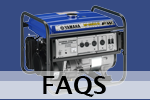
<style>
.page{position:relative;width:150px;height:100px;background:#364b83}
.page>*{position:absolute;margin:0}
.t1{font:24.3px "LucidaSans-Demi";color:#000000}
</style>
<div class="page">
<p class="t1" style="left:43px;top:76px;width:63px;height:21px">FAQS</p>
</div>
